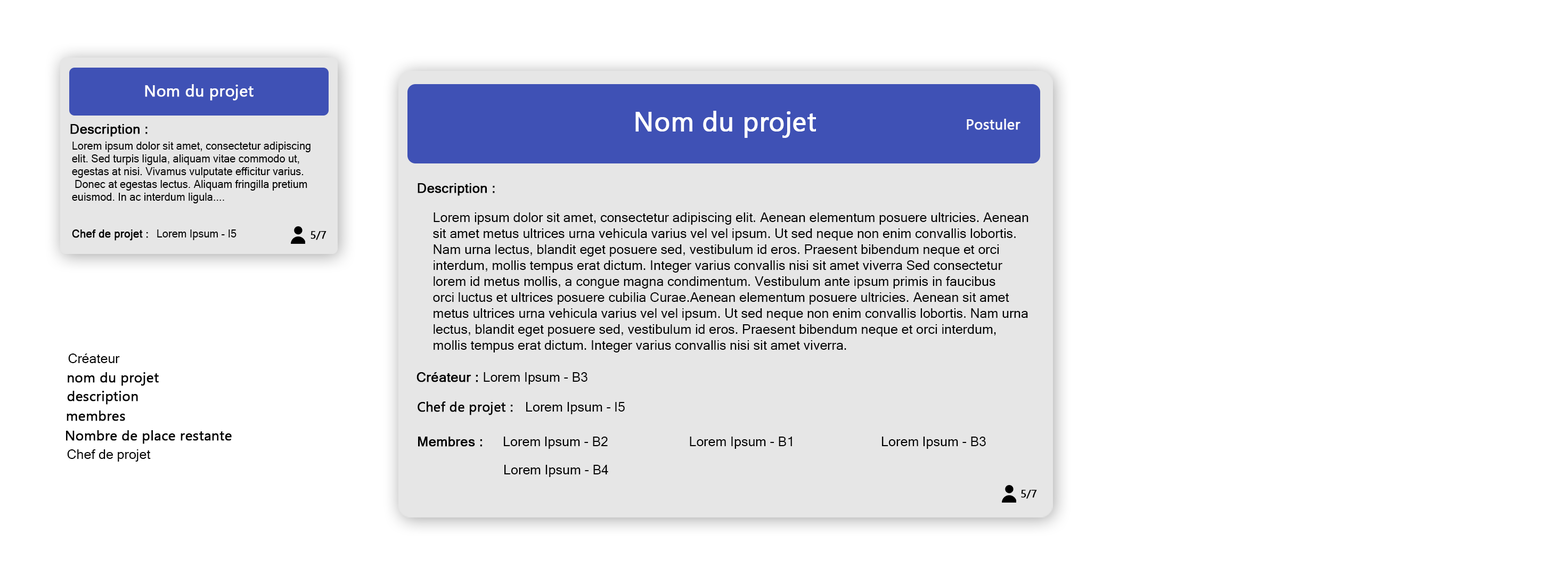
<style>
.page{position:relative;width:1568px;height:575px;background:#ffffff}
.page>*{position:absolute;margin:0}
.t1{font:16px "Gadugi";color:#ffffff;font-weight:bold}
.t2{font:26.6px "Gadugi";color:#ffffff;font-weight:bold}
.t3{font:13.3px "MicrosoftSansSerif";color:#000000;font-weight:bold}
.t4{font:14.4px "Gadugi";color:#ffffff;font-weight:bold}
.t5{font:10.7px "MicrosoftSansSerif";color:#000000}
.t6{font:13.3px "MicrosoftSansSerif";color:#000000}
.t7{font:10.7px "MicrosoftSansSerif";color:#000000;font-weight:bold}
.t8{font:10.7px "Gadugi";color:#000000;font-weight:bold}
.t9{font:13.8px "Gadugi";color:#000000;font-weight:bold}
.t10{font:13.3px "Gadugi";color:#000000;font-weight:bold}
</style>
<div class="page">
<p class="t1" style="left:145px;top:84px;width:109px;height:17px">Nom du projet</p>
<p class="t2" style="left:635px;top:111px;width:181px;height:27px">Nom du projet</p>
<p class="t3" style="left:70px;top:124px;width:78px;height:13px">Description :</p>
<p class="t4" style="left:967px;top:119px;width:53px;height:11px">Postuler</p>
<p class="t5" style="left:72px;top:142px;width:239px;height:61px">Lorem ipsum dolor sit amet, consectetur adipiscing<br>elit. Sed turpis ligula, aliquam vitae commodo ut, <br>egestas at nisi. Vivamus vulputate efficitur varius.<br> Donec at egestas lectus. Aliquam fringilla pretium <br>euismod. In ac interdum ligula....</p>
<p class="t3" style="left:418px;top:183px;width:77px;height:13px">Description :</p>
<p class="t6" style="left:433px;top:213px;width:595px;height:140px">Lorem ipsum dolor sit amet, consectetur adipiscing elit. Aenean elementum posuere ultricies. Aenean <br>sit amet metus ultrices urna vehicula varius vel vel ipsum. Ut sed neque non enim convallis lobortis.<br>Nam urna lectus, blandit eget posuere sed, vestibulum id eros. Praesent bibendum neque et orci <br>interdum, mollis tempus erat dictum. Integer varius convallis nisi sit amet viverra Sed consectetur <br>lorem id metus mollis, a congue magna condimentum. Vestibulum ante ipsum primis in faucibus <br>orci luctus et ultrices posuere cubilia Curae.Aenean elementum posuere ultricies. Aenean sit amet <br>metus ultrices urna vehicula varius vel vel ipsum. Ut sed neque non enim convallis lobortis. Nam urna <br>lectus, blandit eget posuere sed, vestibulum id eros. Praesent bibendum neque et orci interdum,<br>mollis tempus erat dictum. Integer varius convallis nisi sit amet viverra.</p>
<p class="t7" style="left:72px;top:230px;width:76px;height:11px">Chef de projet :</p>
<p class="t5" style="left:157px;top:230px;width:79px;height:10px">Lorem Ipsum - I5</p>
<p class="t8" style="left:311px;top:231px;width:15px;height:9px">5/7</p>
<p class="t6" style="left:68px;top:354px;width:52px;height:9px">Créateur</p>
<p class="t9" style="left:68px;top:372px;width:91px;height:14px">nom du projet</p>
<p class="t6" style="left:416px;top:372px;width:171px;height:13px"><span class="t3">Créateur : </span>Lorem Ipsum - B3</p>
<p class="t9" style="left:67px;top:391px;width:71px;height:14px">description</p>
<p class="t10" style="left:418px;top:402px;width:207px;height:13px">Chef de projet :   <span class="t6">Lorem Ipsum - I5</span></p>
<p class="t9" style="left:67px;top:411px;width:58px;height:10px">membres</p>
<p class="t9" style="left:66px;top:430px;width:166px;height:14px">Nombre de place restante</p>
<p class="t3" style="left:418px;top:437px;width:64px;height:10px">Membres :</p>
<p class="t6" style="left:504px;top:437px;width:104px;height:12px">Lorem Ipsum - B2</p>
<p class="t6" style="left:690px;top:437px;width:102px;height:12px">Lorem Ipsum - B1</p>
<p class="t6" style="left:882px;top:437px;width:104px;height:12px">Lorem Ipsum - B3</p>
<p class="t6" style="left:67px;top:450px;width:84px;height:12px">Chef de projet</p>
<p class="t6" style="left:504px;top:465px;width:104px;height:12px">Lorem Ipsum - B4</p>
<p class="t8" style="left:1021px;top:490px;width:16px;height:9px">5/7</p>
</div>
